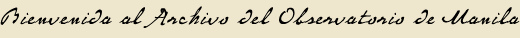
<style>
.page{position:relative;width:520px;height:38px;background:#efe7cd}
.page>*{position:absolute;margin:0}
.t1{font:29.2px "P22MonetRegular";letter-spacing:0.06em;color:#000000}
</style>
<div class="page">
<p class="t1" style="left:0px;top:6px;width:520px;height:22px">Bienvenida al Archivo del Observatorio de Manila</p>
</div>
